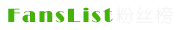
<style>
.page{position:relative;width:180px;height:30px;background:#ffffff}
.page>*{position:absolute;margin:0}
.t1{font:18px "YouYuan";letter-spacing:0.1em;color:#ffffff}
.t2{font:20px "Broadway";letter-spacing:0.1em;color:#44b208}
</style>
<div class="page">
<p class="t1" style="left:116px;top:6px;width:57px;height:18px">粉丝榜</p>
<p class="t2" style="left:8px;top:7px;width:105px;height:16px">FansList</p>
</div>
